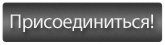
<style>
.page{position:relative;width:165px;height:45px}
.page>*{position:absolute;margin:0}
.t1{font:20px "MyriadPro-Regular";letter-spacing:-0.02em;color:#efefef}
</style>
<div class="page">
<p class="t1" style="left:10px;top:14px;width:144px;height:18px">Присоединиться!</p>
</div>
